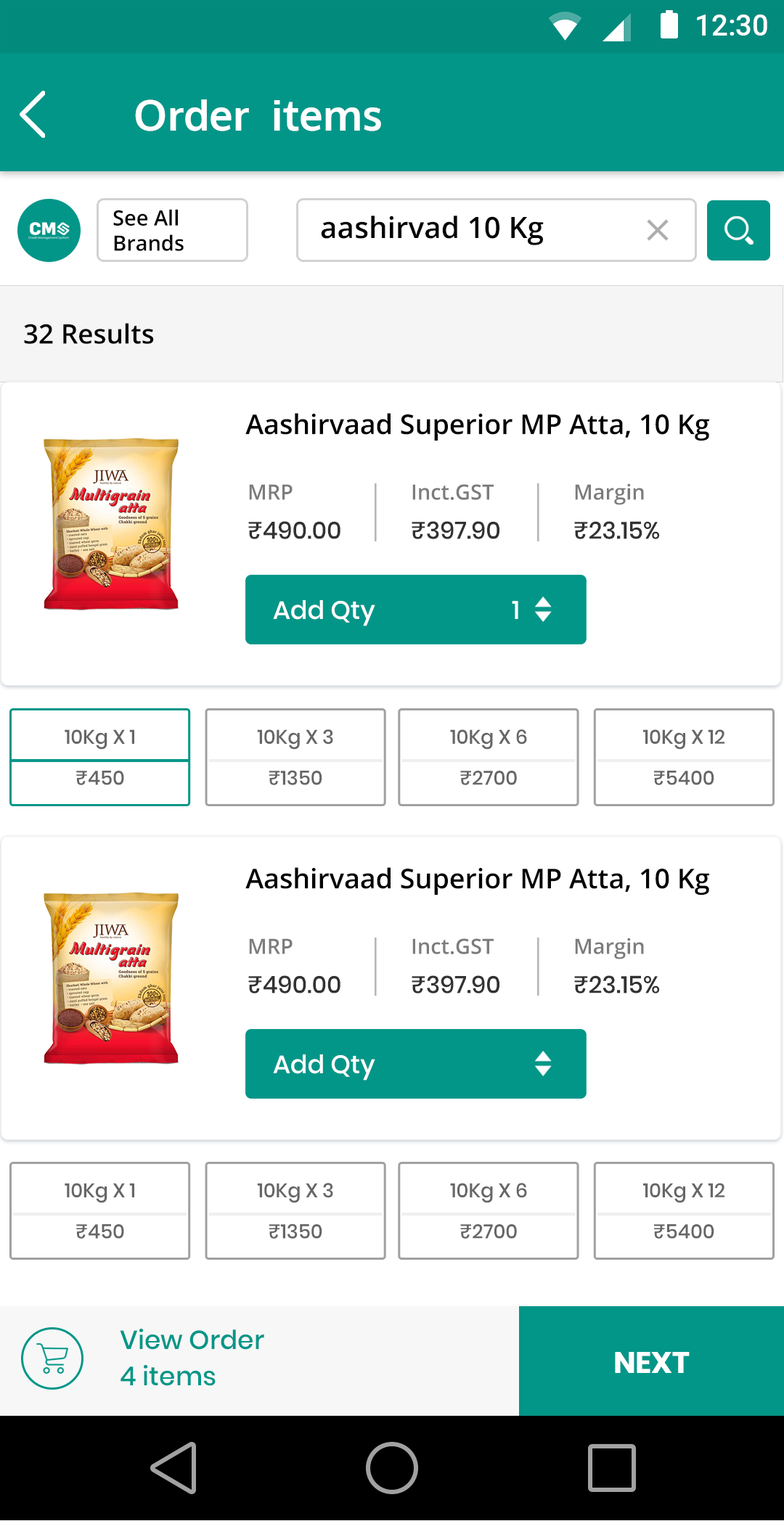
<style>
.page{position:relative;width:784px;height:1521px;background:#ffffff}
.page>*{position:absolute;margin:0}
.t1{font:29.9px "Roboto-Medium";color:#ffffff}
.t2{font:42.1px "Oxygen-Bold";color:#ffffff}
.t3{font:21px "OpenSans-SemiBold";color:#030303}
.t4{font:29.5px "OpenSans-SemiBold";color:#030303}
.t5{font:26.8px "OpenSans-SemiBold";color:#030303}
.t6{font:27.3px "OpenSans-SemiBold";color:#030303}
.t7{font:21px "OpenSans-SemiBold";color:#7c7c7c;text-transform:uppercase}
.t8{font:21px "OpenSans-SemiBold";color:#7c7c7c}
.t9{font:24px "Poppins-Medium";color:#323232;text-transform:uppercase}
.t10{font:25.4px "Poppins-Medium";color:#ffffff}
.t11{font:25.4px "Poppins-Medium";color:#ffffff;text-transform:uppercase}
.t12{font:19.7px "Poppins-Medium";color:#666666}
.t13{font:26.1px "Poppins-Medium";color:#029688}
.t14{font:29.8px "Poppins-Bold";color:#ffffff;text-transform:uppercase}
</style>
<div class="page">
<p class="t1" style="left:697px;top:15px;width:70px;height:21px">12:30</p>
<p class="t2" style="left:135px;top:99px;width:246px;height:32px">Order  items</p>
<p class="t3" style="left:113px;top:209px;width:71px;height:42px">See All<br>Brands</p>
<p class="t4" style="left:321px;top:216px;width:223px;height:29px">aashirvad 10 Kg</p>
<p class="t5" style="left:24px;top:323px;width:130px;height:21px">32 Results</p>
<p class="t6" style="left:245px;top:413px;width:464px;height:28px">Aashirvaad Superior MP Atta, 10 Kg</p>
<p class="t7" style="left:249px;top:484px;width:43px;height:16px">Mrp</p>
<p class="t7" style="left:412px;top:484px;width:82px;height:16px">I<span class="t8">nct</span>.gst</p>
<p class="t8" style="left:575px;top:483px;width:69px;height:22px"><span class="t7">M</span>argin</p>
<p class="t9" style="left:248px;top:521px;width:92px;height:18px">₹490.00</p>
<p class="t9" style="left:412px;top:521px;width:87px;height:18px">₹397.90</p>
<p class="t9" style="left:574px;top:521px;width:86px;height:18px">₹23.15%</p>
<p class="t10" style="left:273px;top:600px;width:245px;height:26px"><span class="t11">A</span>dd Qty                       1</p>
<p class="t12" style="left:65px;top:729px;width:69px;height:21px">10Kg X 1</p>
<p class="t12" style="left:257px;top:729px;width:76px;height:21px">10Kg X 3</p>
<p class="t12" style="left:450px;top:729px;width:77px;height:21px">10Kg X 6</p>
<p class="t12" style="left:643px;top:729px;width:81px;height:21px">10Kg X 12</p>
<p class="t12" style="left:76px;top:771px;width:48px;height:14px">₹450</p>
<p class="t12" style="left:269px;top:770px;width:53px;height:15px">₹1350</p>
<p class="t12" style="left:460px;top:771px;width:57px;height:14px">₹2700</p>
<p class="t12" style="left:654px;top:771px;width:60px;height:14px">₹5400</p>
<p class="t6" style="left:245px;top:867px;width:464px;height:29px">Aashirvaad Superior MP Atta, 10 Kg</p>
<p class="t7" style="left:249px;top:938px;width:43px;height:16px">Mrp</p>
<p class="t7" style="left:412px;top:938px;width:82px;height:16px">I<span class="t8">nct</span>.gst</p>
<p class="t8" style="left:575px;top:938px;width:69px;height:21px"><span class="t7">M</span>argin</p>
<p class="t9" style="left:248px;top:975px;width:92px;height:19px">₹490.00</p>
<p class="t9" style="left:412px;top:975px;width:87px;height:19px">₹397.90</p>
<p class="t9" style="left:574px;top:975px;width:86px;height:19px">₹23.15%</p>
<p class="t10" style="left:273px;top:1055px;width:102px;height:26px"><span class="t11">A</span>dd Qty</p>
<p class="t12" style="left:65px;top:1183px;width:69px;height:20px">10Kg X 1</p>
<p class="t12" style="left:257px;top:1183px;width:76px;height:20px">10Kg X 3</p>
<p class="t12" style="left:450px;top:1183px;width:77px;height:20px">10Kg X 6</p>
<p class="t12" style="left:643px;top:1183px;width:81px;height:20px">10Kg X 12</p>
<p class="t12" style="left:76px;top:1224px;width:48px;height:15px">₹450</p>
<p class="t12" style="left:269px;top:1224px;width:53px;height:15px">₹1350</p>
<p class="t12" style="left:460px;top:1224px;width:57px;height:15px">₹2700</p>
<p class="t12" style="left:654px;top:1224px;width:60px;height:15px">₹5400</p>
<p class="t13" style="left:120px;top:1329px;width:144px;height:21px">View Order</p>
<p class="t14" style="left:615px;top:1352px;width:74px;height:21px">next</p>
<p class="t13" style="left:120px;top:1365px;width:96px;height:21px">4 items</p>
</div>
